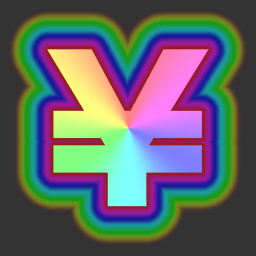
<style>
.page{position:relative;width:256px;height:256px;background:#333333}
.page>*{position:absolute;margin:0}
.t1{font:192px "NewRodinPro-UB"}
</style>
<div class="page">
<p class="t1" style="left:47px;top:49px;width:162px;height:158px">¥</p>
</div>
